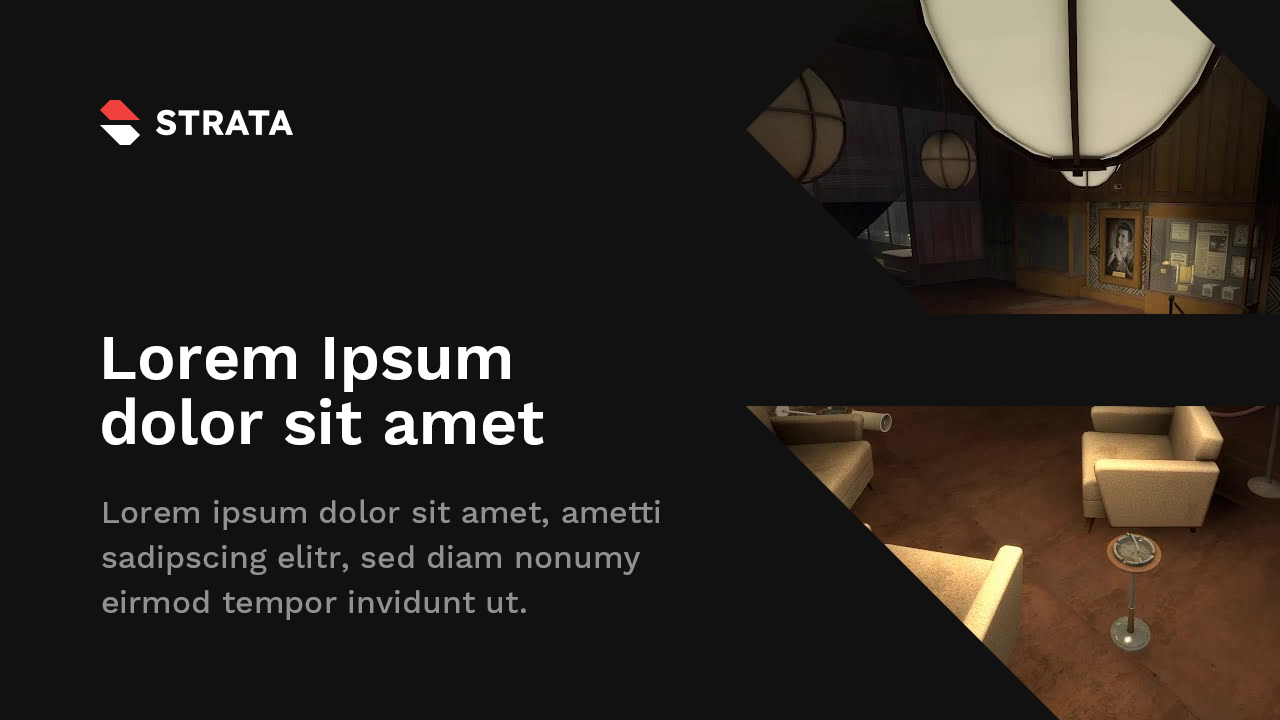
<style>
.page{position:relative;width:1280px;height:720px;background:#111111}
.page>*{position:absolute;margin:0}
.t1{font:64px/65px "WorkSans-SemiBold";color:#ffffff}
.t2{font:32px/45px "WorkSans-Medium";color:#919191}
</style>
<div class="page">
<p class="t1" style="left:102px;top:337px;width:442px;height:108px">Lorem Ipsum<br>dolor sit amet</p>
<p class="t2" style="left:102px;top:499px;width:558px;height:121px">Lorem ipsum dolor sit amet, ametti<br>sadipscing elitr, sed diam nonumy<br>eirmod tempor invidunt ut.</p>
</div>
